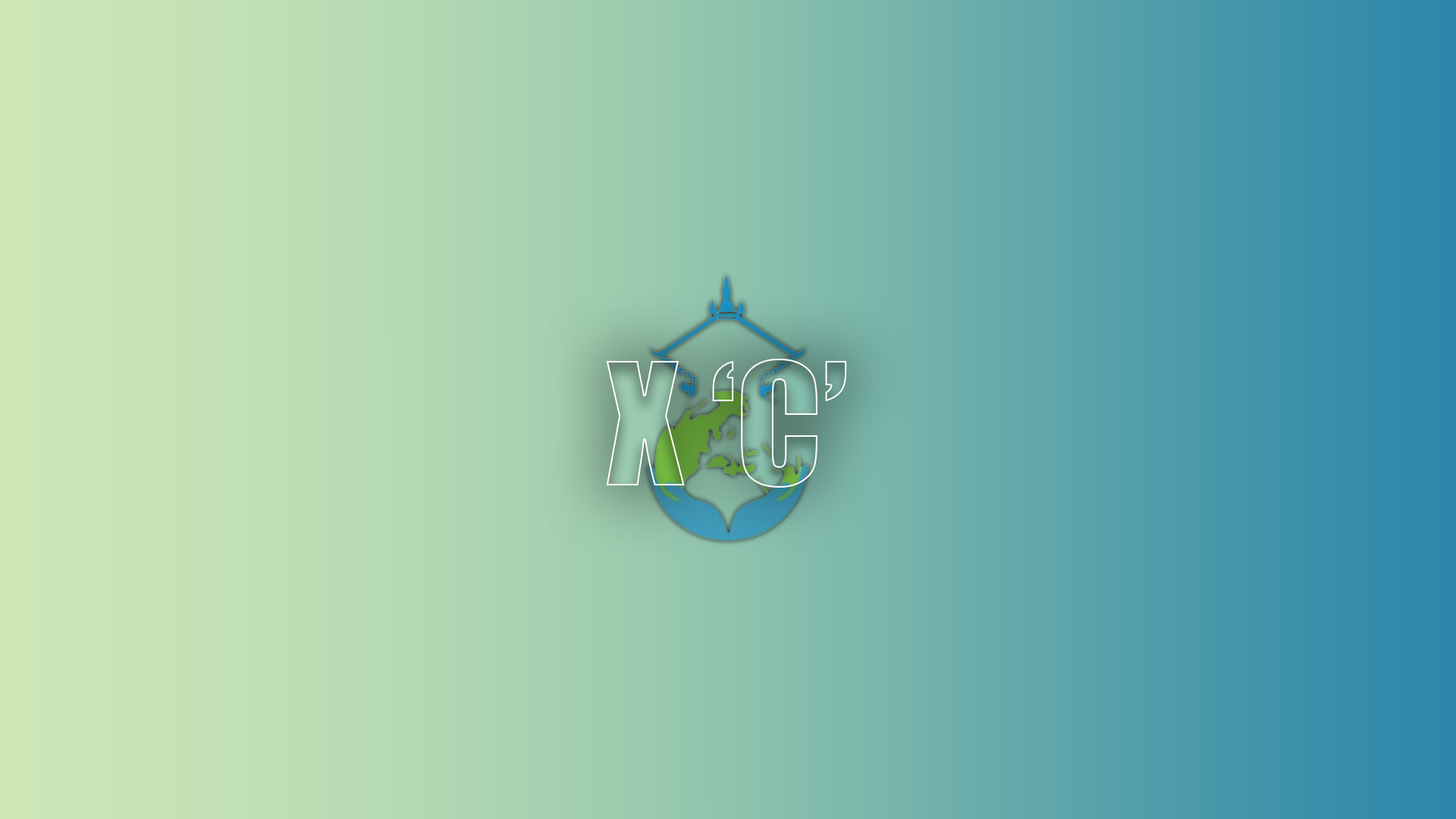
<style>
.page{position:relative;width:1456px;height:819px}
.page>*{position:absolute;margin:0}
.t1{font:156.8px "Impact"}
</style>
<div class="page">
<p class="t1" style="left:606px;top:359px;width:241px;height:129px">X ‘C’</p>
</div>
